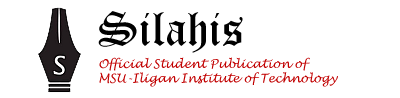
<style>
.page{position:relative;width:400px;height:98px;background:#ffffff}
.page>*{position:absolute;margin:0}
.t1{font:48px "OldEnglishTextMT";color:#000000}
.t2{font:12px "LucidaHandwriting-Italic";color:#c10000}
</style>
<div class="page">
<p class="t1" style="left:98px;top:11px;width:145px;height:42px">Silahis</p>
<p class="t2" style="left:99px;top:57px;width:239px;height:30px;text-align:right">Official Student Publication of<br>MSU-Iligan Institute of Technology</p>
</div>
